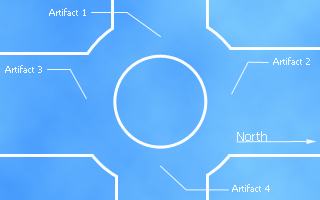
<style>
.page{position:relative;width:320px;height:200px}
.page>*{position:absolute;margin:0}
.t1{font:9px "Tahoma";color:#f1f7ff}
.t2{font:12px "Tahoma";color:#f1f7ff}
</style>
<div class="page">
<p class="t1" style="left:49px;top:8px;width:37px;height:8px">Artifact 1</p>
<p class="t1" style="left:5px;top:65px;width:37px;height:8px">Artifact 3</p>
<p class="t1" style="left:273px;top:57px;width:37px;height:8px">Artifact 2</p>
<p class="t2" style="left:237px;top:131px;width:30px;height:10px">North</p>
<p class="t1" style="left:232px;top:184px;width:38px;height:8px">Artifact 4</p>
</div>
